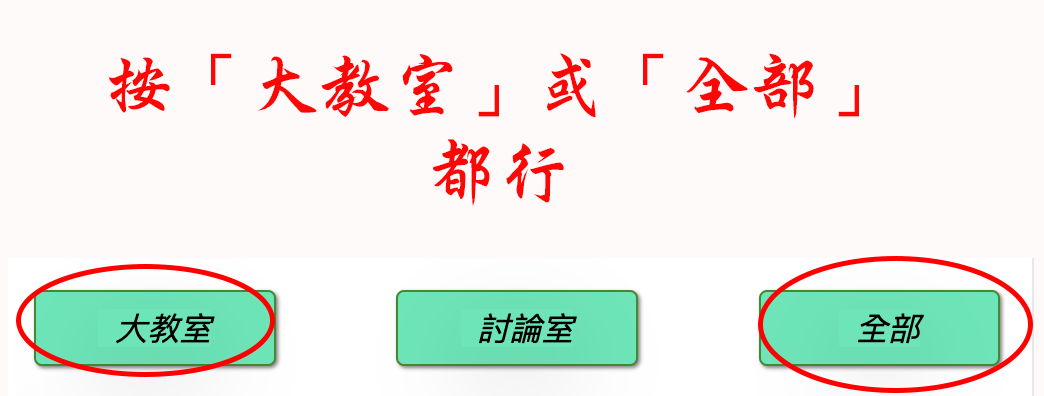
<style>
.page{position:relative;width:1044px;height:396px;background:#fffafa}
.page>*{position:absolute;margin:0}
.t1{font:72px "DFXingKaiStd-W5";color:#fc0606}
</style>
<div class="page">
<p class="t1" style="left:108px;top:53px;width:751px;height:153px;text-align:center">按「大教室」或「全部」<br>都行</p>
</div>
